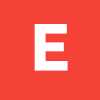
<style>
.page{position:relative;width:100px;height:100px;background:#f44336}
.page>*{position:absolute;margin:0}
.t1{font:65.6px "Raleway-ExtraBold";color:#ffffff}
</style>
<div class="page">
<p class="t1" style="left:34px;top:24px;width:34px;height:47px">E</p>
</div>
